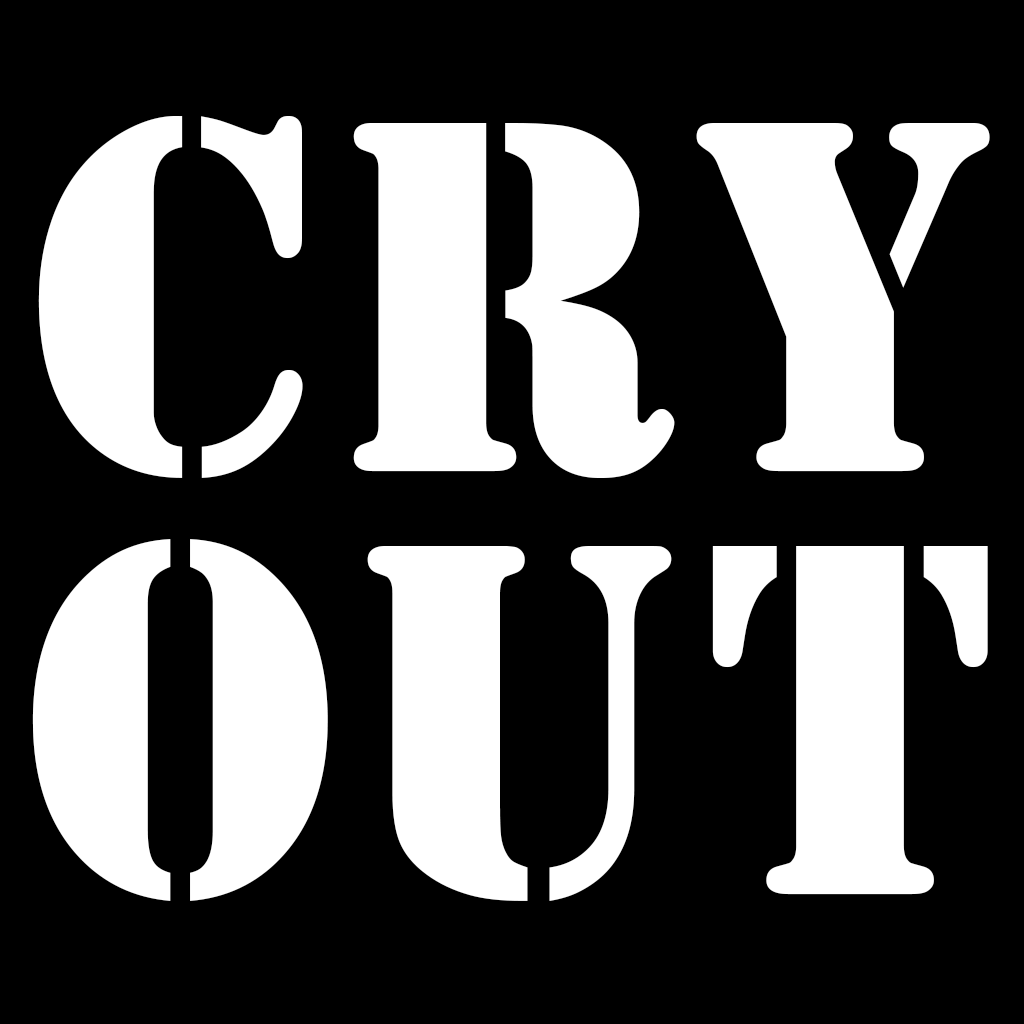
<style>
.page{position:relative;width:1024px;height:1024px;background:#000000}
.page>*{position:absolute;margin:0}
.t1{font:521.6px/423.8px "Stencil";letter-spacing:0.03em;color:#ffffff;scale:0.95 1}
</style>
<div class="page">
<p class="t1" style="left:32px;top:116px;width:958px;height:785px;text-align:center">CRY<br>OUT</p>
</div>
